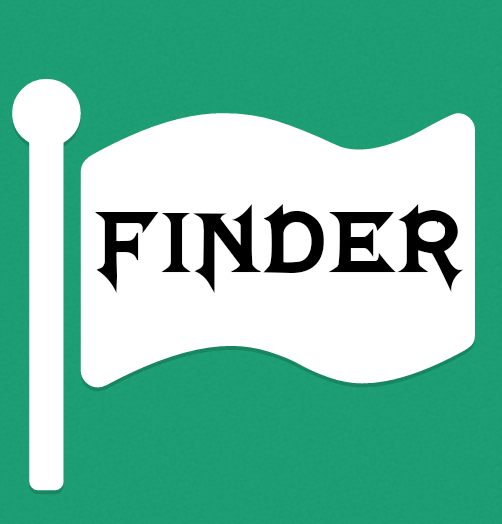
<style>
.page{position:relative;width:502px;height:524px;background:#ffffff}
.page>*{position:absolute;margin:0}
.t1{font:126.2px "Mephisto";color:#000000}
</style>
<div class="page">
<p class="t1" style="left:95px;top:204px;width:369px;height:89px">finder</p>
</div>
